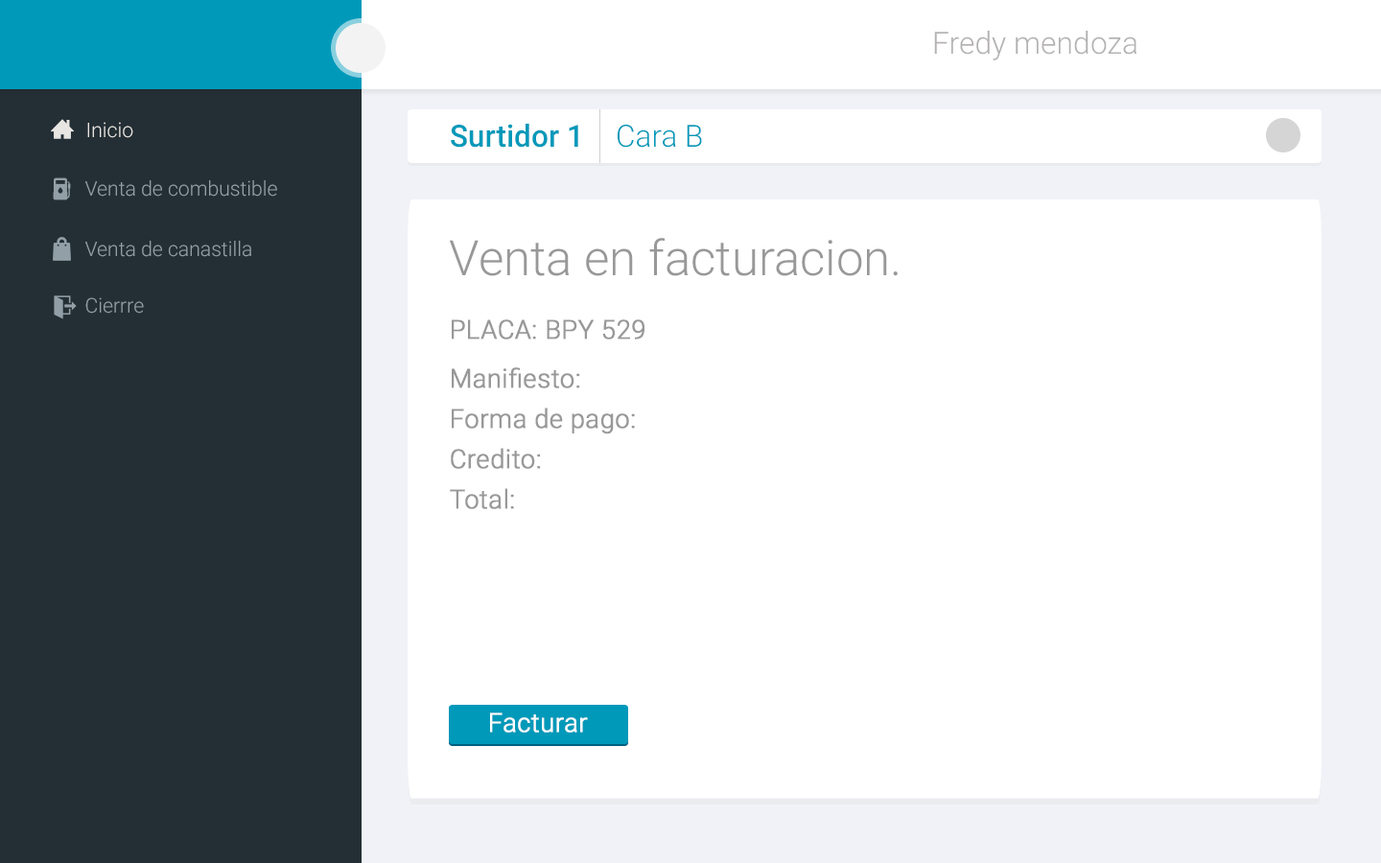
<style>
.page{position:relative;width:1381px;height:863px;background:#ffffff}
.page>*{position:absolute;margin:0}
.t1{font:30.7px "Roboto-Light";color:#b4b1b1}
.t2{font:20.3px "Roboto-Light";color:#e8e6e2}
.t3{font:30.7px "Roboto-Medium";color:#0099b9}
.t4{font:30.7px "Roboto-Light";color:#0099b9}
.t5{font:20.3px "Roboto-Light";color:#939fa7}
.t6{font:48.9px "Roboto-Light";color:#989898}
.t7{font:26.1px "Roboto-Light";color:#989898;font-weight:bold}
.t8{font:26.1px "Roboto-Light";color:#ffffff;font-weight:bold}
</style>
<div class="page">
<p class="t1" style="left:934px;top:31px;width:203px;height:29px">Fredy mendoza</p>
<p class="t2" style="left:87px;top:122px;width:46px;height:16px">Inicio</p>
<p class="t3" style="left:451px;top:124px;width:127px;height:24px">Surtidor 1</p>
<p class="t4" style="left:618px;top:125px;width:84px;height:23px">Cara B</p>
<p class="t5" style="left:85px;top:180px;width:192px;height:17px">Venta de combustible</p>
<p class="t5" style="left:85px;top:241px;width:166px;height:16px">Venta de canastilla</p>
<p class="t6" style="left:449px;top:238px;width:449px;height:38px">Venta en facturacion.</p>
<p class="t5" style="left:85px;top:297px;width:59px;height:17px">Cierrre</p>
<p class="t7" style="left:452px;top:319px;width:193px;height:21px">PLACA: BPY 529</p>
<p class="t7" style="left:452px;top:367px;width:128px;height:21px">Manifiesto:</p>
<p class="t7" style="left:452px;top:408px;width:183px;height:27px">Forma de pago:</p>
<p class="t7" style="left:451px;top:448px;width:90px;height:21px">Credito:</p>
<p class="t7" style="left:450px;top:488px;width:64px;height:21px">Total:</p>
<p class="t8" style="left:490px;top:713px;width:98px;height:20px">Facturar</p>
</div>
